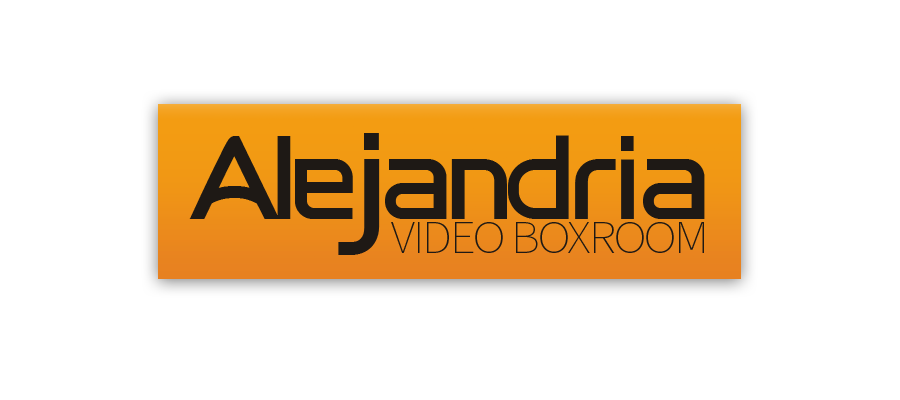
<style>
.page{position:relative;width:900px;height:400px;background:#ffffff}
.page>*{position:absolute;margin:0}
.t1{font:83px "Soap";letter-spacing:-0.04em;color:#1e1915;scale:1.07 1}
.t2{font:93px "Soap";letter-spacing:-0.04em;color:#1e1915;scale:1.07 1}
.t3{font:87px "Soap";letter-spacing:-0.04em;color:#1e1915;scale:1.07 1}
.t4{font:47px "SourceSansPro-ExtraLight";letter-spacing:-0.04em;color:#1e1915;scale:1.07 1}
</style>
<div class="page">
<p class="t1" style="left:189px;top:136px;width:164px;height:83px">Ale</p>
<p class="t2" style="left:338px;top:133px;width:42px;height:122px">j</p>
<p class="t1" style="left:385px;top:135px;width:320px;height:84px"><span class="t3"> </span>andria</p>
<p class="t4" style="left:391px;top:222px;width:313px;height:31px">VIDEO BOXROOM</p>
</div>
